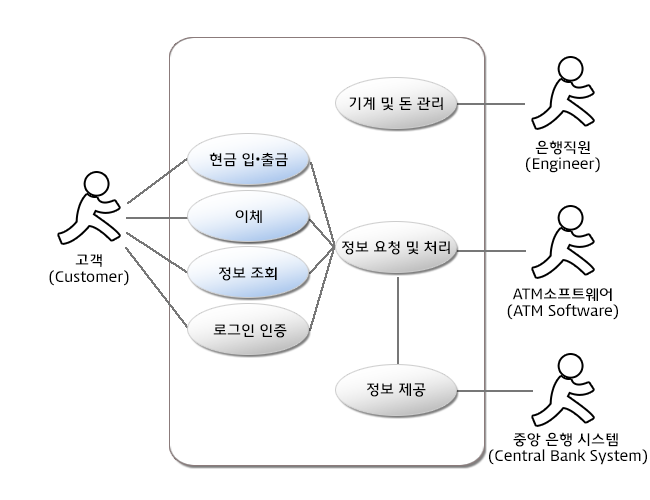
<style>
.page{position:relative;width:650px;height:500px;background:#ffffff}
.page>*{position:absolute;margin:0}
.t1{font:14px "Daum_Regular";color:#000000}
.t2{font:14px "Gulim";color:#000000}
</style>
<div class="page">
<p class="t1" style="left:349px;top:97px;width:94px;height:14px">기계 및 돈 관리</p>
<p class="t1" style="left:526px;top:140px;width:74px;height:33px;text-align:center">은행직원<br>(Engineer)</p>
<p class="t1" style="left:209px;top:152px;width:79px;height:15px">현금 입<span class="t2">•</span>출금</p>
<p class="t1" style="left:235px;top:210px;width:27px;height:13px">이체</p>
<p class="t1" style="left:342px;top:241px;width:108px;height:14px">정보 요청 및 처리</p>
<p class="t1" style="left:49px;top:254px;width:80px;height:32px;text-align:center">고객<br>(Customer)</p>
<p class="t1" style="left:219px;top:267px;width:58px;height:14px">정보 조회</p>
<p class="t1" style="left:507px;top:288px;width:111px;height:32px;text-align:center">ATM소프트웨어<br>(ATM Software)</p>
<p class="t1" style="left:213px;top:324px;width:74px;height:14px">로그인 인증</p>
<p class="t1" style="left:367px;top:383px;width:59px;height:14px">정보 제공</p>
<p class="t1" style="left:489px;top:432px;width:158px;height:33px;text-align:center">중앙 은행 시스템 <br>(Central Bank System)</p>
</div>
